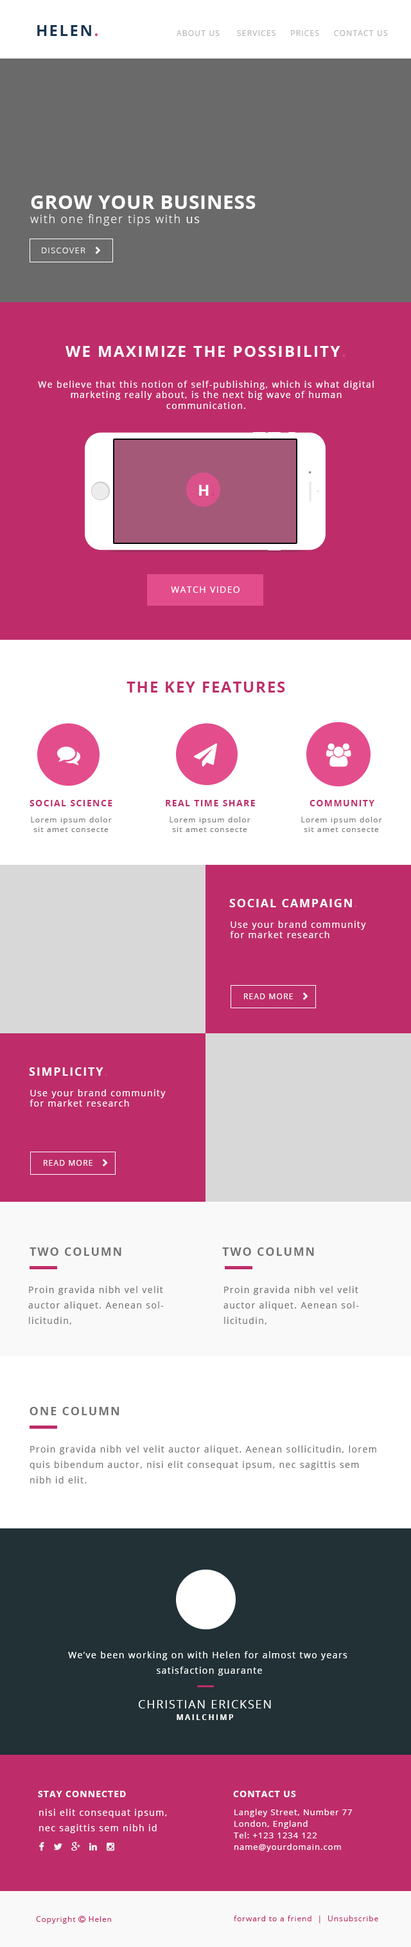
<style>
.page{position:relative;width:411px;height:1947px;background:#be2d6a}
.page>*{position:absolute;margin:0}
.t1{font:15.4px "OpenSans-Bold";letter-spacing:0.1em;color:#183552}
.t2{font:15.4px "OpenSans-Bold";letter-spacing:0.1em;color:#dd3c80}
.t3{font:7.7px "OpenSans";letter-spacing:0.1em;color:#b4b4b4}
.t4{font:11.6px "OpenSans-Light";letter-spacing:0.1em;color:#ffffff}
.t5{font:19.3px "OpenSans-Bold";letter-spacing:0.025em;color:#ffffff;text-transform:uppercase}
.t6{font:11.6px "OpenSans";letter-spacing:0.1em;color:#ffffff}
.t7{font:15.4px "OpenSans-Bold";letter-spacing:0.1em;color:#ffffff;text-transform:uppercase}
.t8{font:15.4px "OpenSans-Bold";letter-spacing:0.1em;color:#dd3c80;text-transform:uppercase}
.t9{font:9px "OpenSans";letter-spacing:0.1em;color:#ffffff}
.t10{font:15.4px "OpenSans-Bold";letter-spacing:0.075em;color:#ffffff}
.t11{font:15.4px "OpenSans-Bold";letter-spacing:0.075em;color:#dd3c80}
.t12{font:9px "OpenSans";letter-spacing:0.1em;color:#ffffff;text-transform:uppercase}
.t13{font:15.4px "OpenSans-Bold";letter-spacing:0.075em;color:#be2d6a;text-transform:uppercase}
.t14{font:9px "OpenSans-Bold";letter-spacing:0.1em;color:#be2d6a;text-transform:uppercase}
.t15{font:7.7px "OpenSans";letter-spacing:0.1em;color:#7a7a7a}
.t16{font:11.6px "OpenSans-Bold";letter-spacing:0.1em;color:#ffffff;text-transform:uppercase}
.t17{font:11.6px "OpenSans-Bold";letter-spacing:0.1em;color:#dd3c80;text-transform:uppercase}
.t18{font:11.6px "OpenSans-Bold";letter-spacing:0.1em;color:#737373}
.t19{font:9px/15.4px "OpenSans";letter-spacing:0.1em;color:#737373}
.t20{font:9px/15.4px "OpenSans";letter-spacing:0.1em;color:#ffffff}
.t21{font:11.6px/19.3px "OpenSans";letter-spacing:0.1em;color:#ffffff;text-transform:uppercase}
.t22{font:7.7px/11.6px "OpenSans-Bold";letter-spacing:0.2em;color:#ffffff}
.t23{font:9px "OpenSans-Bold";letter-spacing:0.075em;color:#ffffff;text-transform:uppercase}
.t24{font:8.4px/11.6px "OpenSans";letter-spacing:0.075em;color:#ffffff}
.t25{font:7.7px "OpenSans";letter-spacing:0.075em;color:#be2d6a}
</style>
<div class="page">
<p class="t1" style="left:37px;top:25px;width:61px;height:11px">HELEN<span class="t2">.</span></p>
<p class="t3" style="left:177px;top:30px;width:211px;height:6px">ABOUT US      SERVICES     PRICES     CONTACT US</p>
<p class="t4" style="left:30px;top:195px;width:226px;height:31px"><span class="t5">grow your business<br></span>with one finger tips with <span class="t6">us</span></p>
<p class="t7" style="left:66px;top:346px;width:280px;height:11px">WE MAXIMIZE THE POSSIBILITY<span class="t8">.</span></p>
<p class="t9" style="left:38px;top:381px;width:336px;height:28px;text-align:center">We believe that this notion of self-publishing, which is what digital marketing really about, is the next big wave of human <br>communication.</p>
<p class="t10" style="left:199px;top:485px;width:16px;height:11px">H<span class="t11">.</span></p>
<p class="t12" style="left:171px;top:586px;width:69px;height:7px">watch video</p>
<p class="t13" style="left:127px;top:681px;width:158px;height:11px">THE KEY FEATURES</p>
<p class="t14" style="left:30px;top:800px;width:83px;height:6px">social science</p>
<p class="t14" style="left:166px;top:800px;width:89px;height:6px">real time share</p>
<p class="t14" style="left:310px;top:800px;width:65px;height:6px">community</p>
<p class="t15" style="left:31px;top:816px;width:81px;height:16px;text-align:center">Lorem ipsum dolor sit amet consecte</p>
<p class="t15" style="left:170px;top:816px;width:81px;height:16px;text-align:center">Lorem ipsum dolor sit amet consecte</p>
<p class="t15" style="left:302px;top:816px;width:80px;height:16px;text-align:center">Lorem ipsum dolor sit amet consecte</p>
<p class="t16" style="left:230px;top:899px;width:127px;height:8px">social campaign<span class="t17">.</span></p>
<p class="t9" style="left:230px;top:921px;width:136px;height:17px">Use your brand community for market research</p>
<p class="t16" style="left:29px;top:1067px;width:78px;height:9px">simplicity<span class="t17">.</span></p>
<p class="t9" style="left:30px;top:1089px;width:136px;height:17px">Use your brand community for market research</p>
<p class="t18" style="left:30px;top:1247px;width:92px;height:9px">TWO COLUMN</p>
<p class="t18" style="left:222px;top:1247px;width:92px;height:9px">TWO COLUMN</p>
<p class="t19" style="left:28px;top:1286px;width:136px;height:38px">Proin gravida nibh vel velit auctor aliquet. Aenean sollicitudin,</p>
<p class="t19" style="left:224px;top:1286px;width:135px;height:38px">Proin gravida nibh vel velit auctor aliquet. Aenean sollicitudin,</p>
<p class="t18" style="left:30px;top:1407px;width:89px;height:8px">ONE COLUMN</p>
<p class="t19" style="left:30px;top:1445px;width:347px;height:38px">Proin gravida nibh vel velit auctor aliquet. Aenean sollicitudin, lorem quis bibendum auctor, nisi elit consequat ipsum, nec sagittis sem nibh id elit.</p>
<p class="t20" style="left:68px;top:1651px;width:280px;height:24px;text-align:center">We’ve been working on with Helen for almost two years <br>satisfaction guarante</p>
<p class="t21" style="left:139px;top:1700px;width:132px;height:20px;text-align:center">Christian Ericksen<br><span class="t22">MAILCHIMP</span></p>
<p class="t23" style="left:38px;top:1790px;width:88px;height:7px">stay connected</p>
<p class="t23" style="left:233px;top:1790px;width:63px;height:7px">contact us</p>
<p class="t20" style="left:39px;top:1808px;width:128px;height:25px">nisi elit consequat ipsum, nec sagittis sem nibh id elit.</p>
<p class="t24" style="left:234px;top:1808px;width:118px;height:43px">Langley Street, Number 77<br>London, England<br>Tel: +123 1234 122<br>name@yourdomain.com</p>
<p class="t25" style="left:234px;top:1915px;width:145px;height:8px">forward to a friend  |  Unsubscribe</p>
</div>
